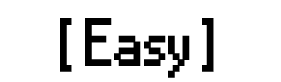
<style>
.page{position:relative;width:281px;height:82px;background:#ffffff}
.page>*{position:absolute;margin:0}
.t1{font:62.5px "Small Fonts";color:#000000;font-weight:bold}
</style>
<div class="page">
<p class="t1" style="left:60px;top:18px;width:154px;height:60px">[ Easy ]</p>
</div>
